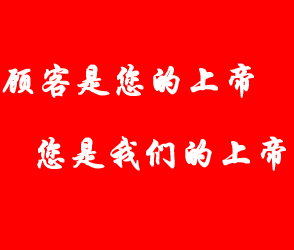
<style>
.page{position:relative;width:294px;height:250px;background:#fe0000}
.page>*{position:absolute;margin:0}
.t1{font:36px "STXingkai";color:#ffffff;font-weight:bold}
</style>
<div class="page">
<p class="t1" style="left:2px;top:63px;width:252px;height:35px">顾客是您的上帝</p>
<p class="t1" style="left:37px;top:136px;width:249px;height:35px">您是我们的上帝</p>
</div>
